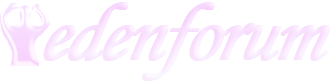
<style>
.page{position:relative;width:335px;height:84px;background:#ffffff}
.page>*{position:absolute;margin:0}
.t1{font:83px "MonotypeCorsiva";letter-spacing:-0.06em;color:#f9e7fe;font-weight:bold;font-style:italic}
</style>
<div class="page">
<p class="t1" style="left:43px;top:2px;width:288px;height:79px">edenforum</p>
</div>
